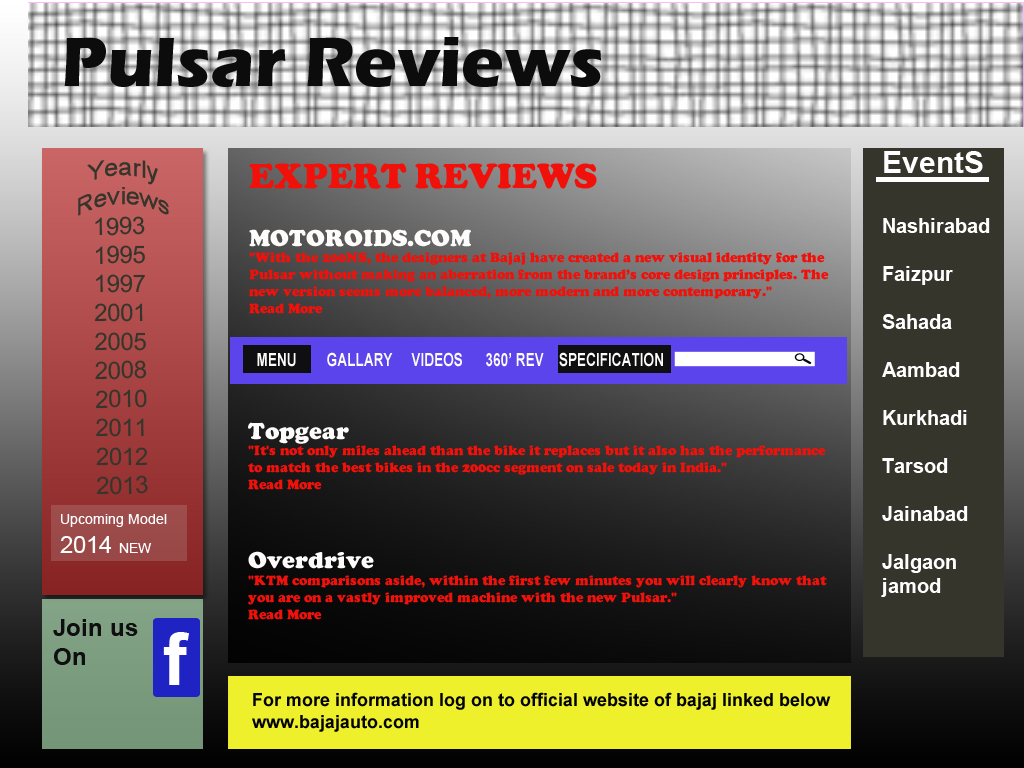
<style>
.page{position:relative;width:1024px;height:768px}
.page>*{position:absolute;margin:0}
.t1{font:72px "ErasITC-Bold";color:#0d0c0d}
.t2{font:24px "ArialMT";color:#35352c}
.t3{font:20px "Arial-BoldMT";color:#ffffff}
.t4{font:30px "Arial-BoldMT";color:#ffffff}
.t5{font:14px "CooperBlack";color:#f0110b}
.t6{font:36px "CooperBlack";color:#f0110b}
.t7{font:24px "CooperBlack";color:#fefbfb}
.t8{font:18px "Arial-BoldMT";color:#fbfbf8;scale:0.76 1}
.t9{font:14px "ArialMT";color:#ffffff}
.t10{font:24px "ArialMT";color:#ffffff}
.t11{font:24px "Arial-BoldMT";color:#0f0f11}
.t12{font:72px "Arial-BoldMT";color:#ffffff}
.t13{font:18px "Arial-BoldMT";color:#030303}
</style>
<div class="page">
<p class="t1" style="left:64px;top:37px;width:537px;height:50px">Pulsar Reviews</p>
<p class="t2" style="left:78px;top:160px;width:91px;height:56px;text-align:center">Yearly <br>Reviews</p>
<p class="t3" style="left:881px;top:151px;width:109px;height:446px"><span class="t4">EventS<br><br></span>Nashirabad<br><br>Faizpur<br><br>Sahada<br><br>Aambad<br><br>Kurkhadi<br><br>Tarsod<br><br>Jainabad<br><br>Jalgaon <br>jamod</p>
<p class="t5" style="left:249px;top:163px;width:580px;height:151px"><span class="t6">EXPERT REVIEWS<br></span><span class="t7"><br>MOTOROIDS.COM<br></span>"With the 200NS, the designers at Bajaj have created a new visual identity for the Pulsar without making an aberration from the brand’s core design principles. The new version seems more balanced, more modern and more contemporary."<br>Read More</p>
<p class="t2" style="left:94px;top:216px;width:54px;height:279px;rotate:-1deg">1993<br>   1995<br>   1997<br>   2001<br>   2005<br>   2008<br>   2010<br>   2011<br>   2012<br>   2013</p>
<p class="t8" style="left:257px;top:352px;width:406px;height:15px">MENU        GALLARY     VIDEOS      360’ REV    SPECIFICATION</p>
<p class="t5" style="left:248px;top:422px;width:579px;height:198px"><span class="t7">Topgear<br></span>"It's not only miles ahead than the bike it replaces but it also has the performance to match the best bikes in the 200cc segment on sale today in India."<br>Read More<br><br><br><br><span class="t7">Overdrive<br></span>"KTM comparisons aside, within the first few minutes you will clearly know that you are on a vastly improved machine with the new Pulsar."<br>Read More</p>
<p class="t9" style="left:60px;top:514px;width:107px;height:39px">Upcoming Model<br><span class="t10">2014 </span>NEW</p>
<p class="t11" style="left:53px;top:619px;width:85px;height:46px">Join us<br>On</p>
<p class="t12" style="left:163px;top:632px;width:26px;height:53px">f</p>
<p class="t13" style="left:252px;top:692px;width:579px;height:40px">For more information log on to official website of bajaj linked below<br>www.bajajauto.com</p>
</div>
